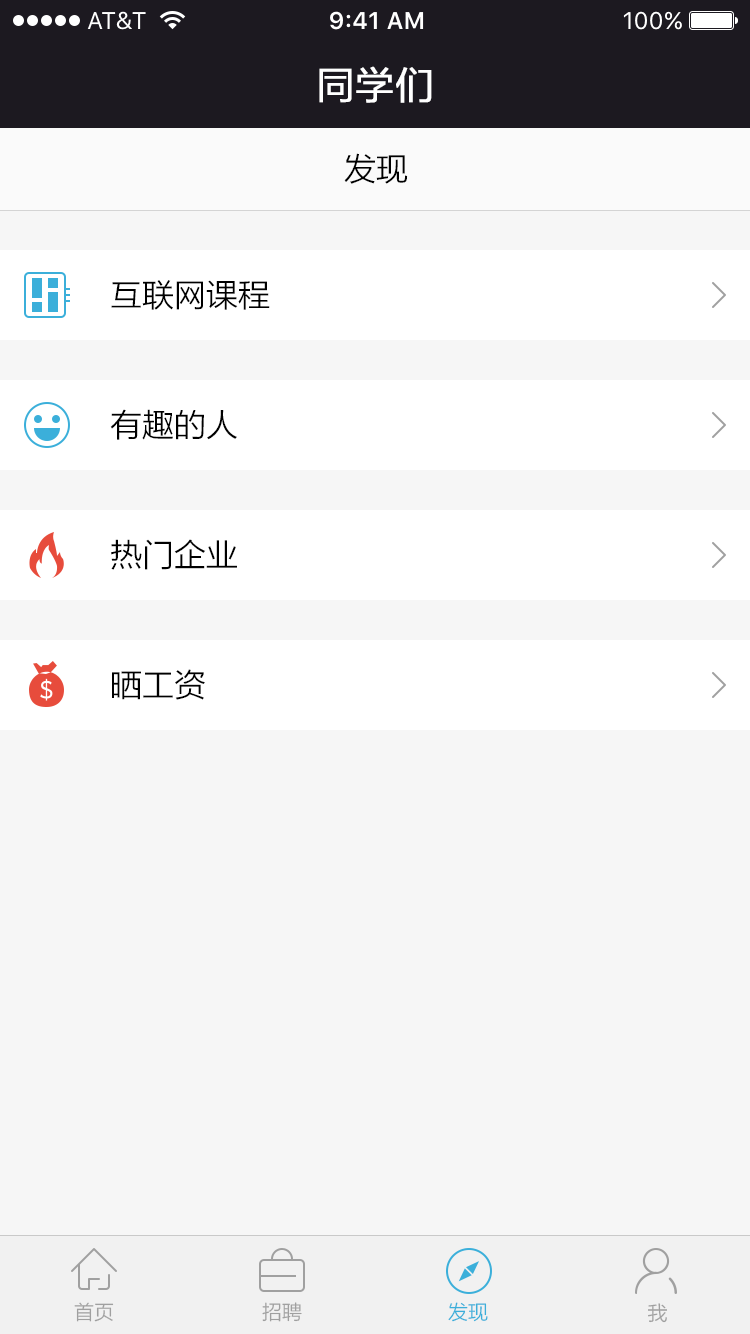
<style>
.page{position:relative;width:750px;height:1334px;background:#f6f6f6}
.page>*{position:absolute;margin:0}
.t1{font:38px "STHeitiTC-Light";color:#ffffff;font-weight:bold}
.t2{font:32px "STHeitiTC-Light";color:#000000}
.t3{font:20px "STHeitiTC-Light";color:#a0a0a0}
.t4{font:20px "STHeitiTC-Light";color:#3bafda}
</style>
<div class="page">
<p class="t1" style="left:319px;top:66px;width:113px;height:37px">同学们</p>
<p class="t2" style="left:344px;top:153px;width:64px;height:31px">发现</p>
<p class="t2" style="left:111px;top:280px;width:159px;height:30px">互联网课程</p>
<p class="t2" style="left:110px;top:409px;width:127px;height:31px">有趣的人</p>
<p class="t2" style="left:111px;top:539px;width:126px;height:31px">热门企业</p>
<p class="t2" style="left:112px;top:669px;width:93px;height:31px">晒工资</p>
<p class="t3" style="left:74px;top:1302px;width:40px;height:20px">首页</p>
<p class="t3" style="left:262px;top:1302px;width:40px;height:20px">招聘</p>
<p class="t4" style="left:448px;top:1302px;width:40px;height:20px">发现</p>
<p class="t3" style="left:648px;top:1303px;width:19px;height:20px">我</p>
</div>
